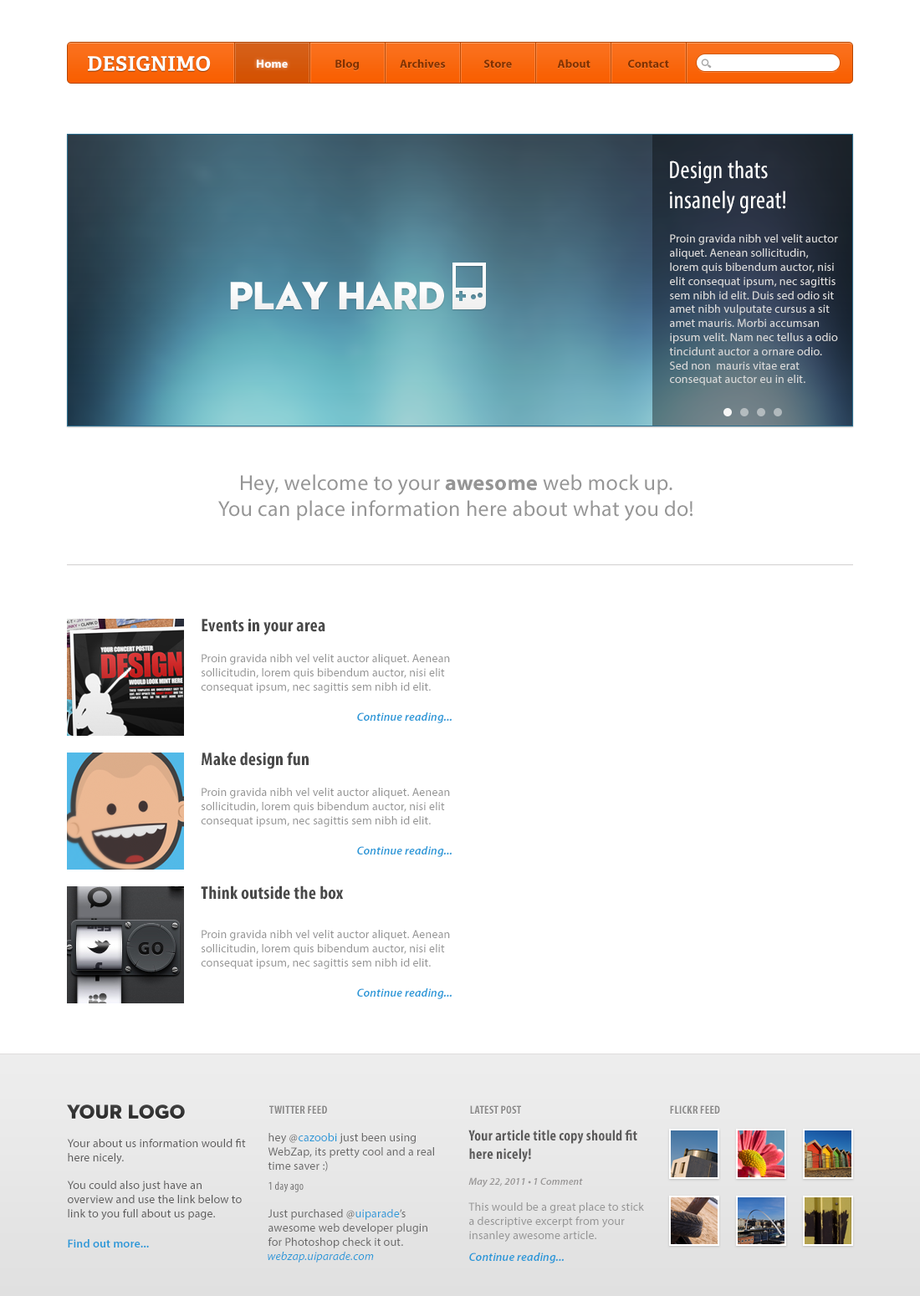
<style>
.page{position:relative;width:920px;height:1296px;background:#ffffff}
.page>*{position:absolute;margin:0}
.t1{font:11.7px "MyriadPro-Bold";letter-spacing:0.013em;color:#ffffff}
.t2{font:11.7px "MyriadPro-Bold";letter-spacing:0.013em;color:#813101}
.t3{font:25.1px "MyriadPro-Cond";letter-spacing:0.013em;color:#ffffff}
.t4{font:11.7px "MyriadPro-Regular";letter-spacing:0.013em;color:#dcdcdc}
.t5{font:21.7px "MyriadPro-Regular";letter-spacing:0.013em;color:#959595}
.t6{font:21.7px "MyriadPro-Bold";letter-spacing:0.013em;color:#959595}
.t7{font:18.4px "MyriadPro-BoldCond";letter-spacing:0.013em;color:#494949}
.t8{font:11.7px "MyriadPro-Regular";letter-spacing:0.013em;color:#959595}
.t9{font:11.7px "MyriadPro-SemiboldIt";letter-spacing:0.013em;color:#2a99d8}
.t10{font:11.7px "MyriadPro-BoldCond";letter-spacing:0.013em;color:#8a8989}
.t11{font:11.7px "MyriadPro-Regular";letter-spacing:0.013em;color:#6a6969}
.t12{font:11.7px/20.1px "MyriadPro-Cond";letter-spacing:0.013em;color:#6a6969}
.t13{font:11.7px "MyriadPro-Regular";letter-spacing:0.013em;color:#2a99d8}
.t14{font:15.1px "MyriadPro-BoldCond";letter-spacing:0.013em;color:#5c5b5b}
.t15{font:10px "MyriadPro-SemiboldIt";letter-spacing:0.013em;color:#999797}
.t16{font:11.7px "MyriadPro-Regular";letter-spacing:0.013em;color:#5d5c5c}
.t17{font:11.7px "MyriadPro-Semibold";letter-spacing:0.013em;color:#2a99d8}
.t18{font:11.7px "MyriadPro-It";letter-spacing:0.013em;color:#2a99d8}
</style>
<div class="page">
<p class="t1" style="left:257px;top:59px;width:31px;height:9px">Home</p>
<p class="t2" style="left:335px;top:59px;width:24px;height:11px">Blog</p>
<p class="t2" style="left:400px;top:59px;width:46px;height:9px">Archives</p>
<p class="t2" style="left:484px;top:59px;width:28px;height:9px">Store</p>
<p class="t2" style="left:557px;top:59px;width:33px;height:9px">About</p>
<p class="t2" style="left:628px;top:59px;width:41px;height:9px">Contact</p>
<p class="t3" style="left:669px;top:161px;width:116px;height:53px">Design thats <br>insanely great!</p>
<p class="t4" style="left:669px;top:234px;width:169px;height:152px">Proin gravida nibh vel velit auctor aliquet. Aenean sollicitudin, lorem quis bibendum auctor, nisi elit consequat ipsum, nec sagittis sem nibh id elit. Duis sed odio sit amet nibh vulputate cursus a sit amet mauris. Morbi accumsan ipsum velit. Nam nec tellus a odio tincidunt auctor a ornare odio. Sed non  mauris vitae erat consequat auctor eu in elit.</p>
<p class="t5" style="left:218px;top:474px;width:474px;height:47px;text-align:center">Hey, welcome to your <span class="t6">awesome</span> web mock up. <br>You can place information here about what you do!</p>
<p class="t7" style="left:202px;top:619px;width:123px;height:17px">Events in your area</p>
<p class="t8" style="left:201px;top:654px;width:249px;height:39px">Proin gravida nibh vel velit auctor aliquet. Aenean sollicitudin, lorem quis bibendum auctor, nisi elit consequat ipsum, nec sagittis sem nibh id elit.</p>
<p class="t9" style="left:357px;top:713px;width:95px;height:10px">Continue reading...</p>
<p class="t7" style="left:202px;top:752px;width:107px;height:17px">Make design fun</p>
<p class="t8" style="left:201px;top:788px;width:249px;height:39px">Proin gravida nibh vel velit auctor aliquet. Aenean sollicitudin, lorem quis bibendum auctor, nisi elit consequat ipsum, nec sagittis sem nibh id elit.</p>
<p class="t9" style="left:357px;top:846px;width:95px;height:11px">Continue reading...</p>
<p class="t7" style="left:201px;top:886px;width:143px;height:14px">Think outside the box</p>
<p class="t8" style="left:201px;top:930px;width:249px;height:39px">Proin gravida nibh vel velit auctor aliquet. Aenean sollicitudin, lorem quis bibendum auctor, nisi elit consequat ipsum, nec sagittis sem nibh id elit.</p>
<p class="t9" style="left:357px;top:988px;width:95px;height:11px">Continue reading...</p>
<p class="t10" style="left:269px;top:1106px;width:58px;height:8px">TWITTER FEED</p>
<p class="t10" style="left:470px;top:1106px;width:51px;height:8px">LATEST POST</p>
<p class="t10" style="left:670px;top:1106px;width:50px;height:8px">FLICKR FEED</p>
<p class="t11" style="left:268px;top:1133px;width:166px;height:116px">hey @                just been using WebZap, its pretty cool and a real time saver :)<br><span class="t12">1 day ago<br></span><br>Just purchased @                 ’s <br>awesome web developer plugin for Photoshop check it out.</p>
<p class="t13" style="left:299px;top:1133px;width:38px;height:9px">cazoobi</p>
<p class="t8" style="left:468px;top:1130px;width:176px;height:112px"><span class="t14">Your article title copy should fit here nicely!<br><br></span><span class="t15">May 22, 2011 • 1 Comment<br><br></span>This would be a great place to stick a descriptive excerpt from your insanley awesome article.</p>
<p class="t16" style="left:67px;top:1139px;width:179px;height:81px">Your about us information would fit here nicely. <br><br>You could also just have an overview and use the link below to link to you full about us page.</p>
<p class="t13" style="left:355px;top:1209px;width:45px;height:11px">uiparade</p>
<p class="t17" style="left:68px;top:1239px;width:81px;height:9px">Find out more...</p>
<p class="t18" style="left:268px;top:1252px;width:106px;height:11px">webzap.uiparade.com</p>
<p class="t9" style="left:469px;top:1253px;width:95px;height:11px">Continue reading...</p>
</div>
